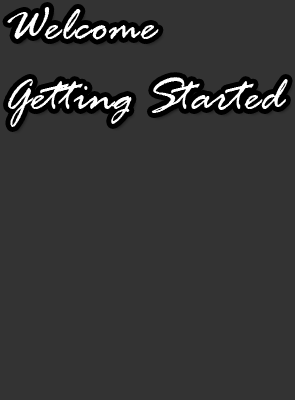
<style>
.page{position:relative;width:295px;height:400px;background:#333333}
.page>*{position:absolute;margin:0}
.t1{font:50px "RageItalic";color:#ffffff}
</style>
<div class="page">
<p class="t1" style="left:7px;top:7px;width:152px;height:33px">Welcome</p>
<p class="t1" style="left:8px;top:77px;width:280px;height:50px">Getting Started</p>
</div>
